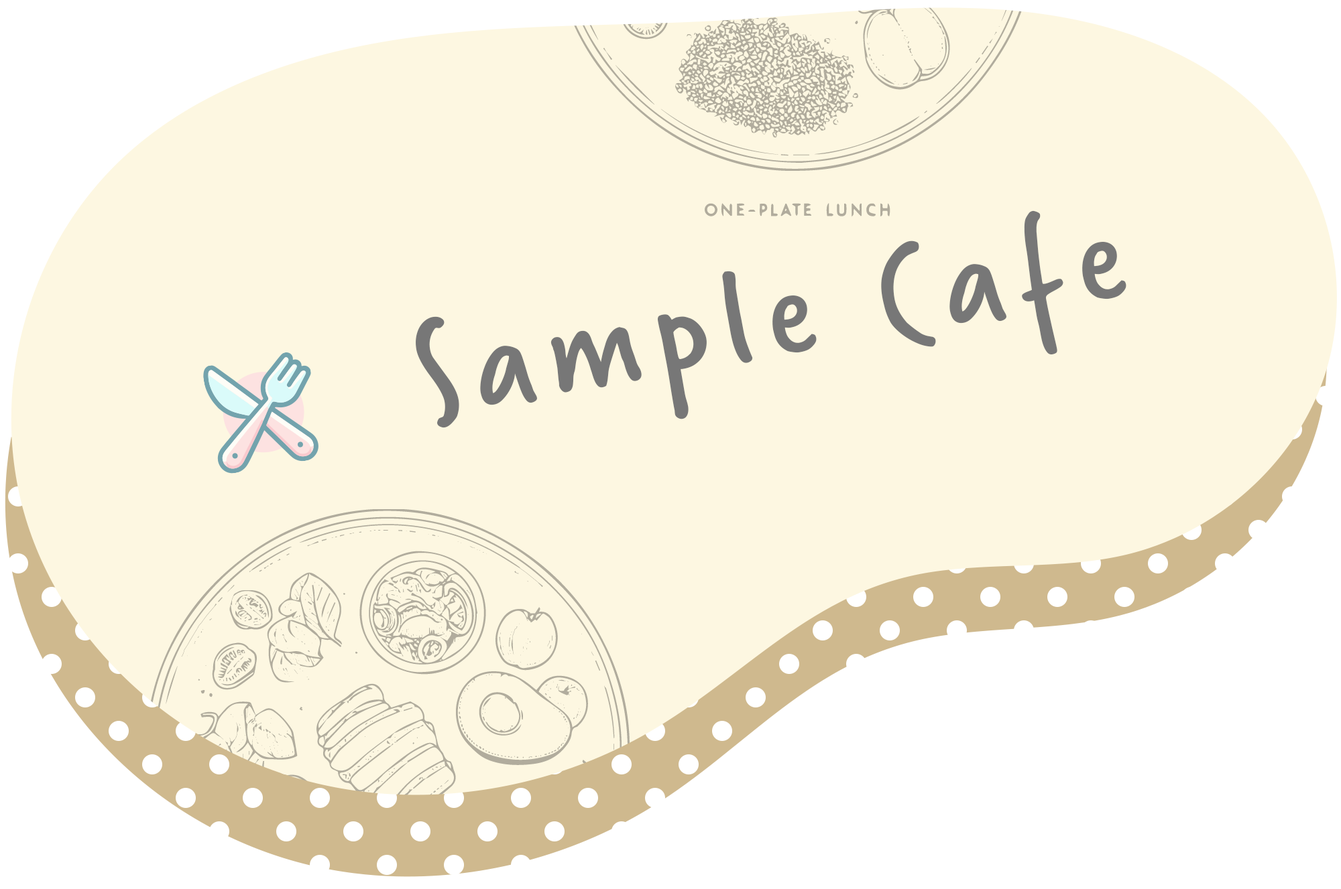
<style>
.page{position:relative;width:1341px;height:889px;background:#fdf7e1}
.page>*{position:absolute;margin:0}
.t1{font:146.3px "Verveine-Regular";letter-spacing:0.1em;color:#777777}
</style>
<div class="page">
<p class="t1" style="left:416px;top:210px;width:710px;height:218px;rotate:-10deg">Sample Cafe</p>
</div>
